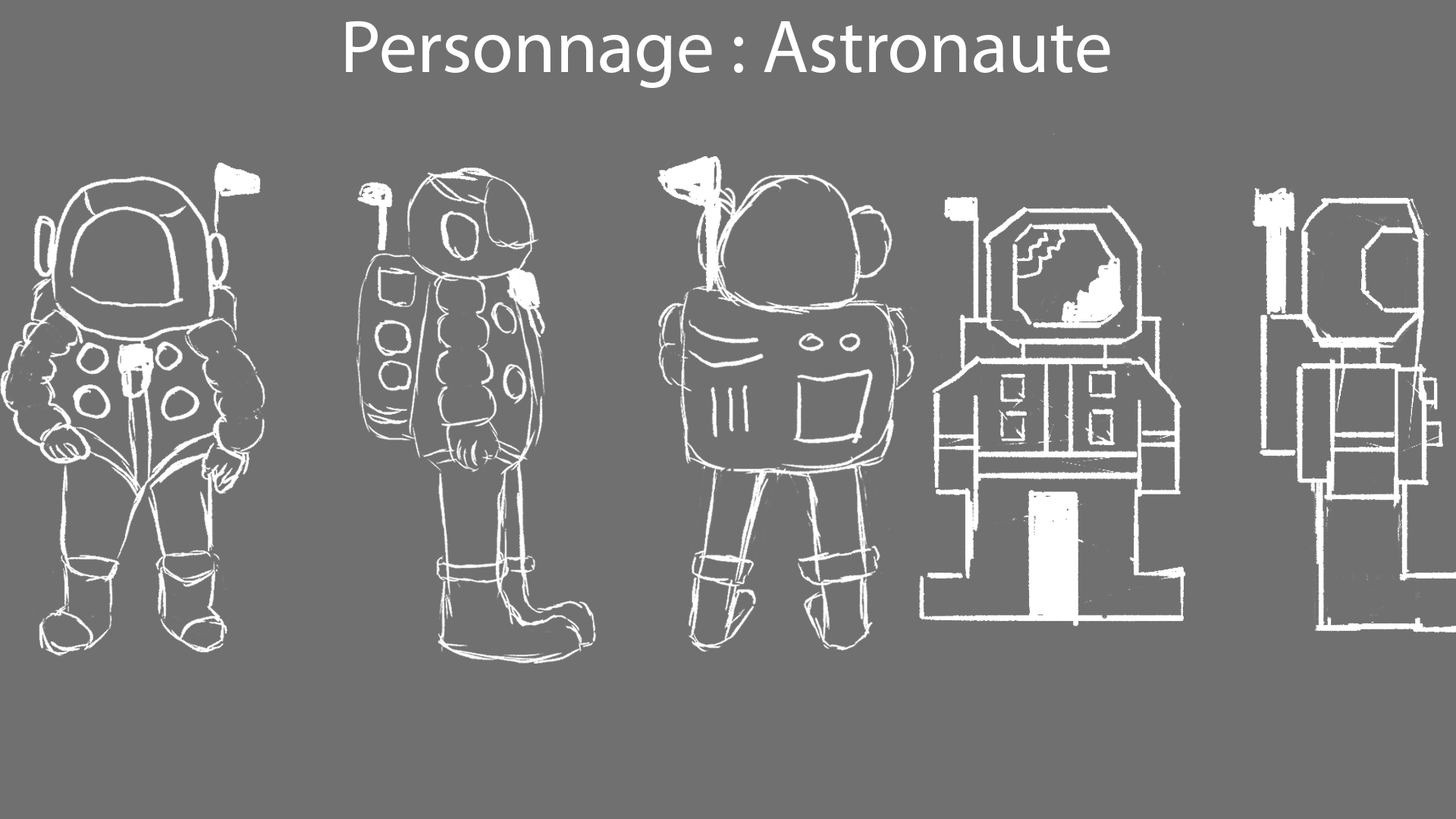
<style>
.page{position:relative;width:1456px;height:819px;background:#707070}
.page>*{position:absolute;margin:0}
.t1{font:75.8px "MyriadPro-Regular";color:#ffffff}
</style>
<div class="page">
<p class="t1" style="left:346px;top:21px;width:764px;height:67px">Personnage : Astronaute</p>
</div>
